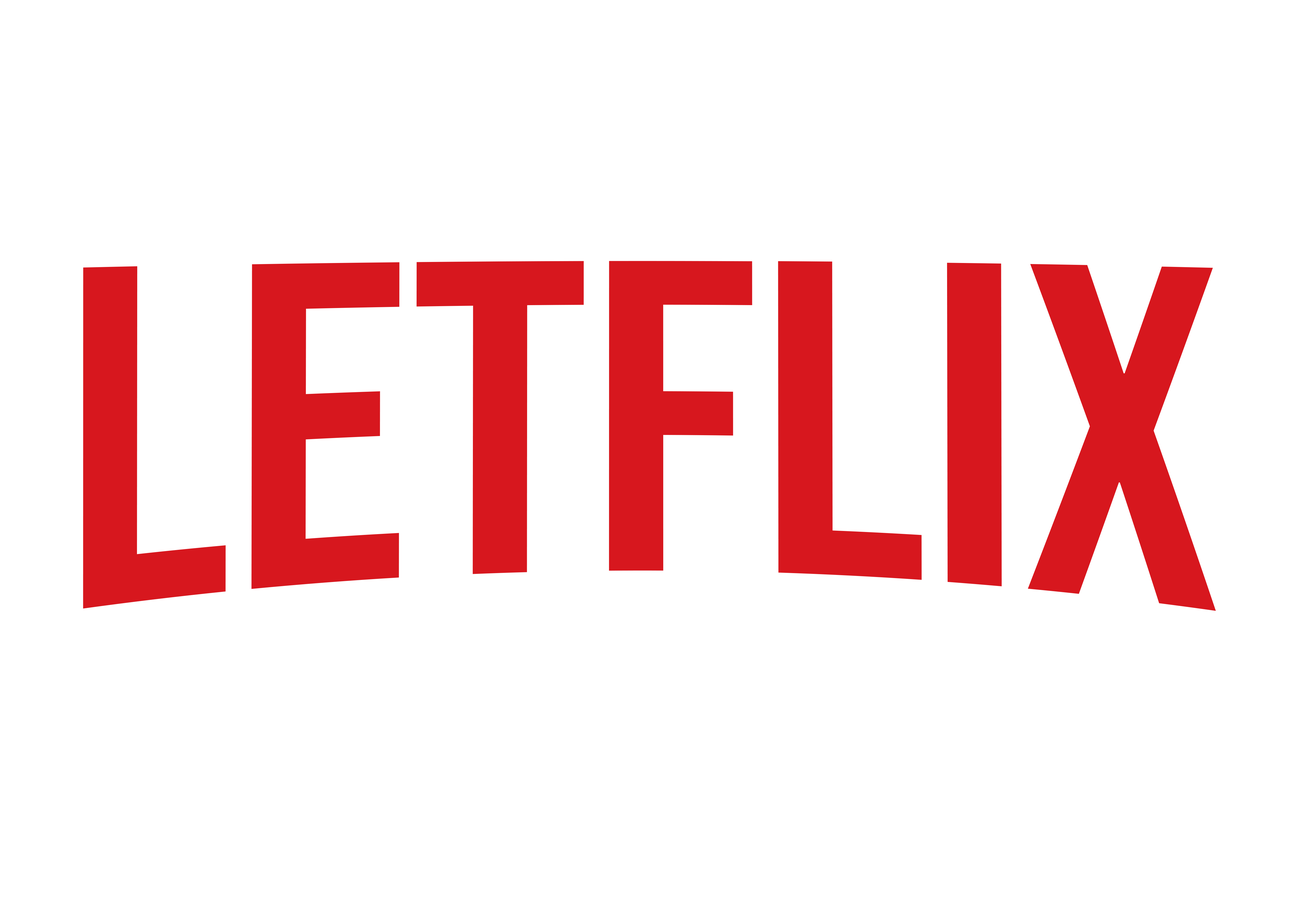
<style>
.page{position:relative;width:1299px;height:918px;background:#ffffff}
.page>*{position:absolute;margin:0}
.t1{font:490.9px "BebasNeue-Regular";color:#d7171e}
</style>
<div class="page">
<p class="t1" style="left:83px;top:261px;width:1133px;height:350px">LETFLIX</p>
</div>
